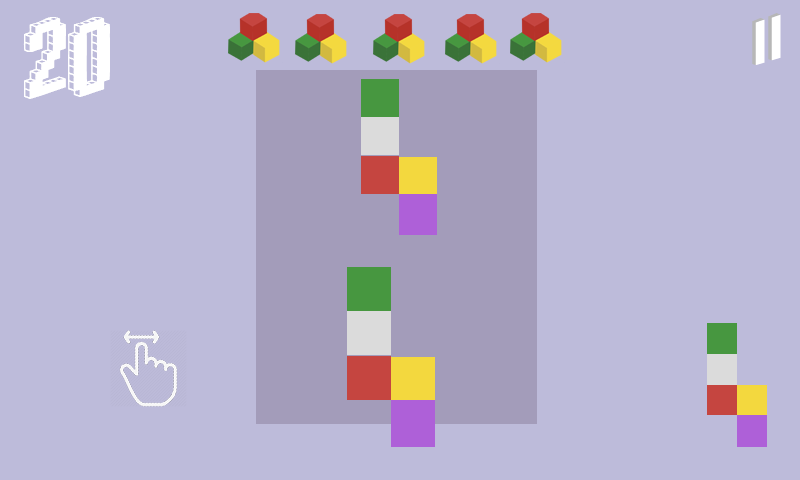
<style>
.page{position:relative;width:800px;height:480px;background:#bdbbda}
.page>*{position:absolute;margin:0}
.t1{font:89px "Blox-(BRK";color:#ffffff}
</style>
<div class="page">
<p class="t1" style="left:23px;top:17px;width:87px;height:82px">20</p>
</div>
